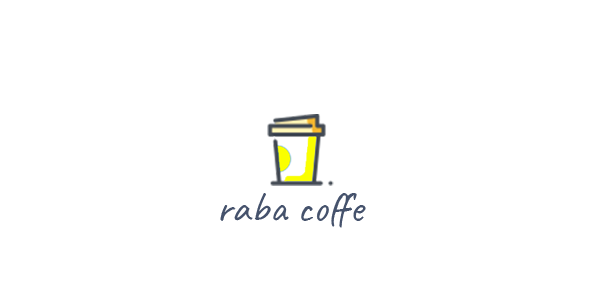
<style>
.page{position:relative;width:600px;height:300px;background:#ffffff}
.page>*{position:absolute;margin:0}
.t1{font:43px "Caveat-Regular";color:#45526c}
</style>
<div class="page">
<p class="t1" style="left:220px;top:193px;width:146px;height:35px">raba coffe</p>
</div>
